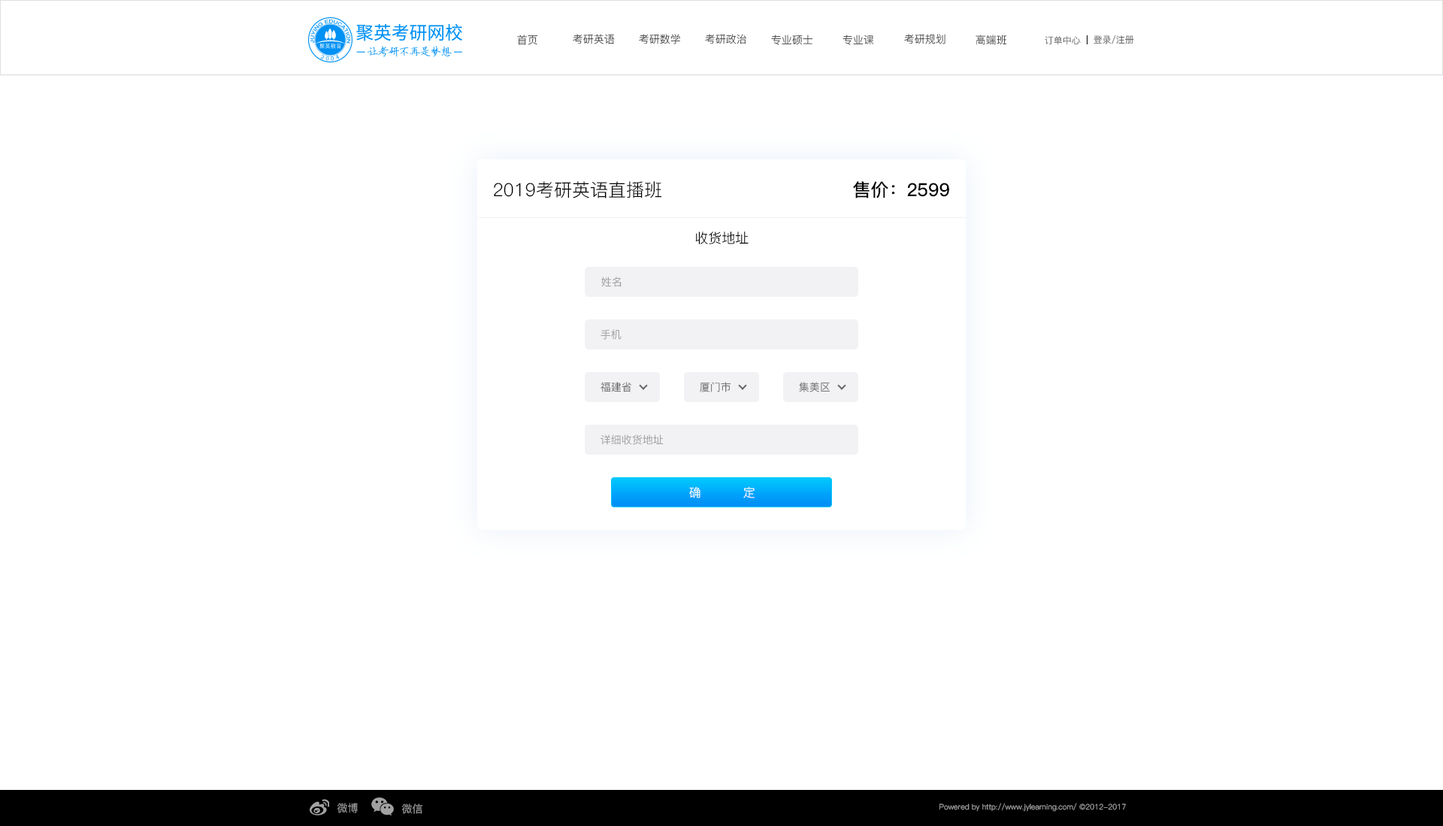
<style>
.page{position:relative;width:1443px;height:826px;background:#ffffff}
.page>*{position:absolute;margin:0}
.t1{font:10.5px "PingFang-SC-Regular"}
.t2{font:10.5px "PingFang-SC-Regular";color:#333333}
.t3{font:9px "PingFang-SC-Regular"}
.t4{font:18px "PingFang-SC-Regular";color:#000000}
.t5{font:18px "PingFang-SC-Bold";color:#000000}
.t6{font:13.5px "PingFang-SC-Regular";color:#000000}
.t7{font:10.5px "PingFang-SC-Regular";color:#999999}
.t8{font:10.5px "PingFang-SC-Regular";color:#666666}
.t9{font:12px "PingFang-SC-Regular";color:#ffffff}
.t10{font:10.5px "PingFang-SC-Regular";color:#a1a1a1}
.t11{font:7.5px "PingFang-SC-Regular";color:#a1a1a1}
</style>
<div class="page">
<p class="t1" style="left:517px;top:35px;width:21px;height:10px">首页</p>
<p class="t1" style="left:573px;top:34px;width:42px;height:10px">考研英语</p>
<p class="t1" style="left:639px;top:34px;width:41px;height:10px">考研数学</p>
<p class="t2" style="left:705px;top:34px;width:41px;height:10px">考研政治</p>
<p class="t1" style="left:771px;top:35px;width:42px;height:10px">专业硕士</p>
<p class="t1" style="left:843px;top:35px;width:31px;height:10px">专业课</p>
<p class="t1" style="left:904px;top:34px;width:42px;height:10px">考研规划</p>
<p class="t1" style="left:976px;top:35px;width:31px;height:10px">高端班</p>
<p class="t3" style="left:1045px;top:36px;width:36px;height:9px">订单中心</p>
<p class="t3" style="left:1094px;top:35px;width:40px;height:9px">登录/注册</p>
<p class="t4" style="left:494px;top:181px;width:168px;height:17px">2019考研英语直播班</p>
<p class="t5" style="left:853px;top:181px;width:96px;height:17px">售价：2599</p>
<p class="t6" style="left:695px;top:232px;width:54px;height:12px">收货地址</p>
<p class="t7" style="left:601px;top:277px;width:21px;height:10px">姓名</p>
<p class="t7" style="left:601px;top:329px;width:21px;height:11px">手机</p>
<p class="t8" style="left:601px;top:382px;width:30px;height:10px">福建省</p>
<p class="t8" style="left:700px;top:382px;width:31px;height:10px">厦门市</p>
<p class="t8" style="left:799px;top:382px;width:32px;height:10px">集美区</p>
<p class="t7" style="left:601px;top:435px;width:63px;height:10px">详细收货地址</p>
<p class="t9" style="left:689px;top:486px;width:66px;height:12px">确  定</p>
<p class="t10" style="left:337px;top:803px;width:21px;height:10px">微博</p>
<p class="t10" style="left:401px;top:804px;width:22px;height:10px">微信</p>
<p class="t11" style="left:940px;top:803px;width:186px;height:9px">Powered by http://www.jylearning.com/ ©2012-2017</p>
</div>
